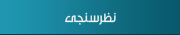
<style>
.page{position:relative;width:180px;height:35px}
.page>*{position:absolute;margin:0}
.t1{font:14px "Mj_Flow";letter-spacing:-0.001em;color:#f1f2f2}
</style>
<div class="page">
<p class="t1" style="left:65px;top:12px;width:51px;height:13px">نظرسنجی</p>
</div>
